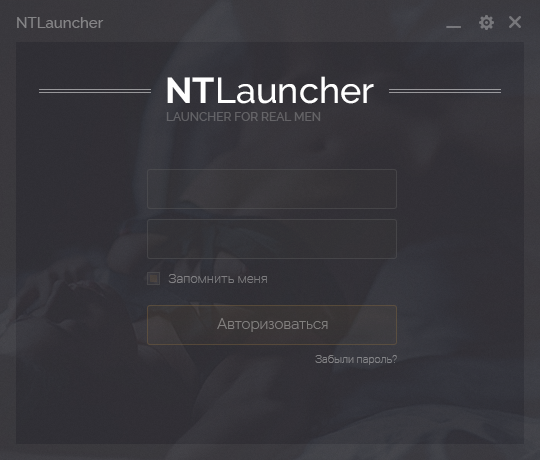
<style>
.page{position:relative;width:540px;height:460px}
.page>*{position:absolute;margin:0}
.t1{font:15px "Raleway-Medium";color:#858587}
.t2{font:36px "Raleway-Medium";color:#ffffff}
.t3{font:36px "Raleway-Bold";color:#ffffff}
.t4{font:12px "Raleway-Medium";color:#646366;text-transform:uppercase}
.t5{font:13px "Roboto-Thin";color:#7e7d80}
.t6{font:15px "Raleway-Light";color:#82807e}
.t7{font:11px "Roboto-Thin";color:#848588}
</style>
<div class="page">
<p class="t1" style="left:17px;top:17px;width:87px;height:11px">NTLauncher</p>
<p class="t2" style="left:167px;top:76px;width:207px;height:28px"><span class="t3">NT</span>Launcher</p>
<p class="t4" style="left:166px;top:112px;width:155px;height:9px">launcher for real men</p>
<p class="t5" style="left:168px;top:274px;width:99px;height:9px">Запомнить меня</p>
<p class="t6" style="left:217px;top:318px;width:111px;height:14px">Авторизоваться</p>
<p class="t7" style="left:315px;top:355px;width:82px;height:10px">Забыли пароль?</p>
</div>
